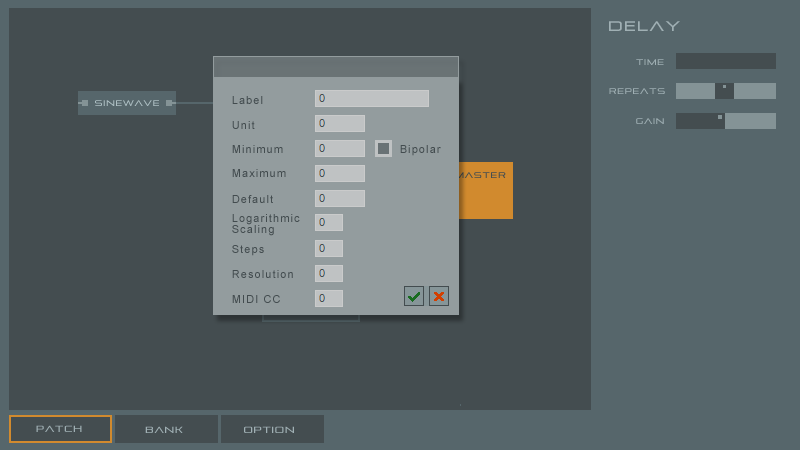
<style>
.page{position:relative;width:800px;height:450px;background:#444d50}
.page>*{position:absolute;margin:0}
.t1{font:14px "Pirulen";letter-spacing:0.1em;color:#a0b0b4}
.t2{font:8px "Pirulen";letter-spacing:0.1em;color:#a0b0b4}
.t3{font:8px "Pirulen";letter-spacing:0.1em;color:#aec0c4}
.t4{font:11px "ArialMT";letter-spacing:0.1em;color:#434c4f}
.t5{font:8px "Pirulen";letter-spacing:0.1em}
.t6{font:11px/11px "ArialMT";letter-spacing:0.1em;color:#434c4f}
.t7{font:9px "Pirulen";letter-spacing:0.1em;color:#a0b0b4}
</style>
<div class="page">
<p class="t1" style="left:609px;top:21px;width:71px;height:10px">delay</p>
<p class="t2" style="left:636px;top:59px;width:28px;height:6px">time</p>
<p class="t2" style="left:609px;top:88px;width:56px;height:6px">repeats</p>
<p class="t3" style="left:95px;top:100px;width:64px;height:6px">sinewave</p>
<p class="t4" style="left:232px;top:96px;width:31px;height:8px">Label</p>
<p class="t4" style="left:232px;top:121px;width:23px;height:8px">Unit</p>
<p class="t2" style="left:636px;top:118px;width:28px;height:6px">gain</p>
<p class="t4" style="left:232px;top:145px;width:51px;height:8px">Minimum</p>
<p class="t4" style="left:400px;top:145px;width:41px;height:11px">Bipolar</p>
<p class="t4" style="left:232px;top:169px;width:54px;height:8px">Maximum</p>
<p class="t5" style="left:455px;top:172px;width:51px;height:6px">master</p>
<p class="t4" style="left:232px;top:195px;width:41px;height:8px">Default</p>
<p class="t6" style="left:232px;top:214px;width:68px;height:22px">Logarithmic<br>Scaling</p>
<p class="t4" style="left:232px;top:245px;width:32px;height:11px">Steps</p>
<p class="t4" style="left:232px;top:270px;width:61px;height:8px">Resolution</p>
<p class="t4" style="left:232px;top:295px;width:48px;height:8px">MIDI CC</p>
<p class="t7" style="left:36px;top:425px;width:46px;height:7px">patch</p>
<p class="t7" style="left:145px;top:426px;width:38px;height:7px">bank</p>
<p class="t7" style="left:244px;top:426px;width:50px;height:7px">option</p>
</div>
